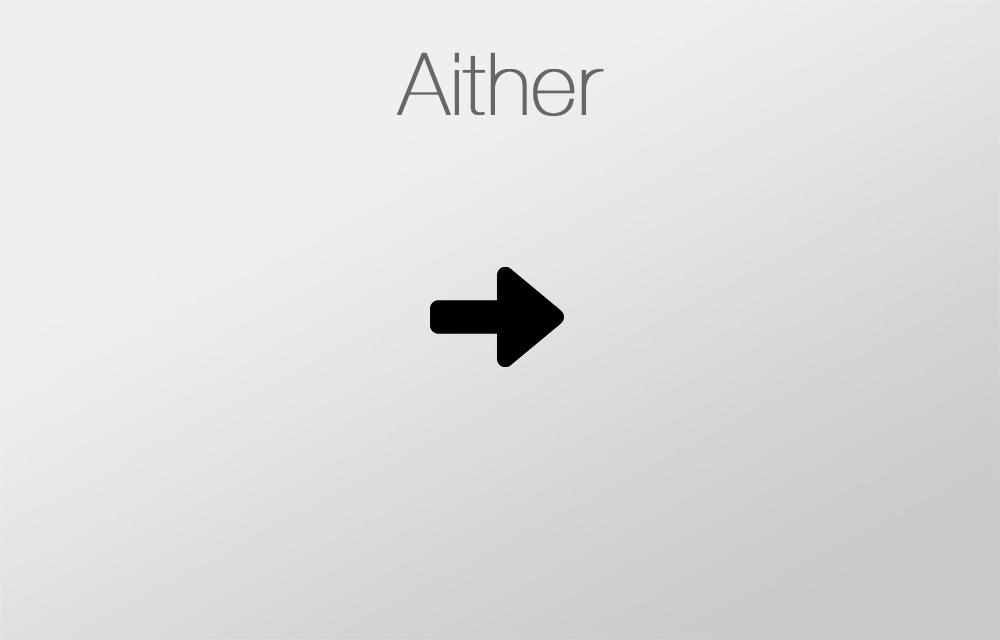
<style>
.page{position:relative;width:1000px;height:640px}
.page>*{position:absolute;margin:0}
.t1{font:85.7px "HelveticaNeue-UltraLight";color:#666666;font-weight:bold}
</style>
<div class="page">
<p class="t1" style="left:397px;top:52px;width:207px;height:65px">Aither</p>
</div>
